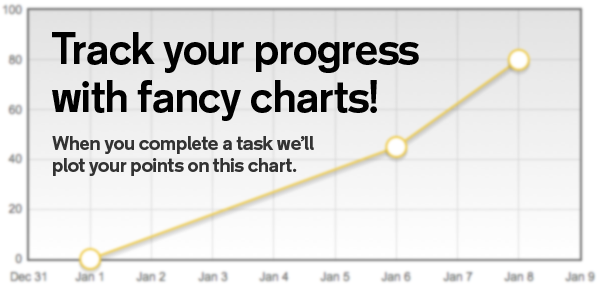
<style>
.page{position:relative;width:597px;height:287px}
.page>*{position:absolute;margin:0}
.t1{font:40px "GalaxieAlliance-Bold";color:#000000}
.t2{font:18px "GalaxieAlliance-Bold";color:#333333}
</style>
<div class="page">
<p class="t1" style="left:52px;top:32px;width:367px;height:89px">Track your progress <br>with fancy charts!</p>
<p class="t2" style="left:52px;top:136px;width:262px;height:40px">When you complete a task we’ll <br>plot your points on this chart.</p>
</div>
